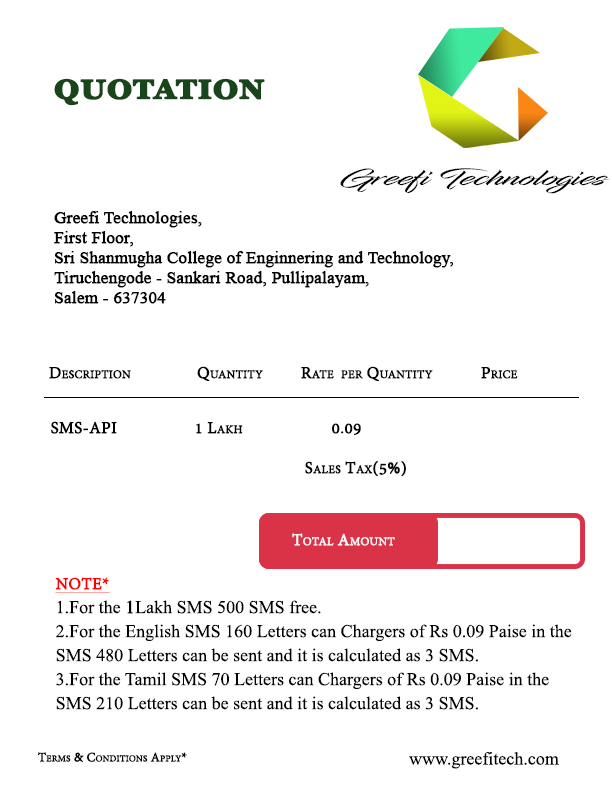
<style>
.page{position:relative;width:612px;height:792px;background:#ffffff}
.page>*{position:absolute;margin:0}
.t1{font:36px "Georgia-Bold";color:#19451b;font-variant:small-caps;font-weight:bold}
.t2{font:22.6px "InfiniteStroke";color:#000000;scale:1.61 1}
.t3{font:16.7px "TimesNewRomanPSMT";color:#000000;font-weight:bold}
.t4{font:18px "AdobeGurmukhi-Regular";color:#010202;font-variant:small-caps;font-weight:bold}
.t5{font:18px "AdobeGurmukhi-Regular";color:#fbf7f8;font-variant:small-caps;font-weight:bold}
.t6{font:18px/24px "TimesNewRomanPSMT";color:#010101}
.t7{font:18px/24px "AdobeGurmukhi-Regular";color:#ff0000;font-variant:small-caps;font-weight:bold;text-decoration:underline}
.t8{font:18px/24px "TimesNewRomanPSMT";color:#010101;font-weight:bold}
.t9{font:14px "AdobeGurmukhi-Regular";color:#010202;font-variant:small-caps;font-weight:bold}
.t10{font:18px "TimesNewRomanPSMT";color:#000000}
</style>
<div class="page">
<p class="t1" style="left:54px;top:78px;width:211px;height:28px">quotation</p>
<p class="t2" style="left:340px;top:168px;width:270px;height:26px">Greefi Technologies</p>
<p class="t3" style="left:54px;top:211px;width:400px;height:93px">Greefi Technologies, <br>First Floor,<br>Sri Shanmugha College of Enginnering and Technology,<br>Tiruchengode - Sankari Road, Pullipalayam,<br>Salem - 637304</p>
<p class="t4" style="left:49px;top:366px;width:469px;height:15px">Description   Quantity  Rate  per Quantity         Price</p>
<p class="t4" style="left:51px;top:421px;width:310px;height:14px">SMS-API   1 Lakh         0.09</p>
<p class="t4" style="left:305px;top:460px;width:101px;height:17px">Sales Tax(5%)</p>
<p class="t5" style="left:292px;top:533px;width:103px;height:13px">Total Amount</p>
<p class="t6" style="left:55px;top:577px;width:517px;height:133px"><span class="t7">NOTE*<br></span>1.For the<span class="t8"> 1</span>Lakh SMS 500 SMS free.<br>2.For the English SMS 160 Letters can Chargers of Rs 0.09 Paise in the SMS 480 Letters can be sent and it is calculated as 3 SMS.<br>3.For the Tamil SMS 70 Letters can Chargers of Rs 0.09 Paise in the SMS 210 Letters can be sent and it is calculated as 3 SMS.</p>
<p class="t9" style="left:38px;top:752px;width:149px;height:10px">Terms &amp; Conditions Apply*</p>
<p class="t10" style="left:409px;top:752px;width:150px;height:17px">www.greefitech.com</p>
</div>
